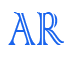
<style>
.page{position:relative;width:71px;height:61px;background:#ffffff}
.page>*{position:absolute;margin:0}
.t1{font:62.7px "ColonnaMT";color:#1964ed;scale:0.65 1}
</style>
<div class="page">
<p class="t1" style="left:8px;top:12px;width:56px;height:33px">AR</p>
</div>
